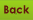
<style>
.page{position:relative;width:33px;height:20px}
.page>*{position:absolute;margin:0}
.t1{font:11.3px "CenturyGothic-Bold";color:#62170d;scale:0.93 1}
</style>
<div class="page">
<p class="t1" style="left:4px;top:5px;width:26px;height:9px">Back</p>
</div>
